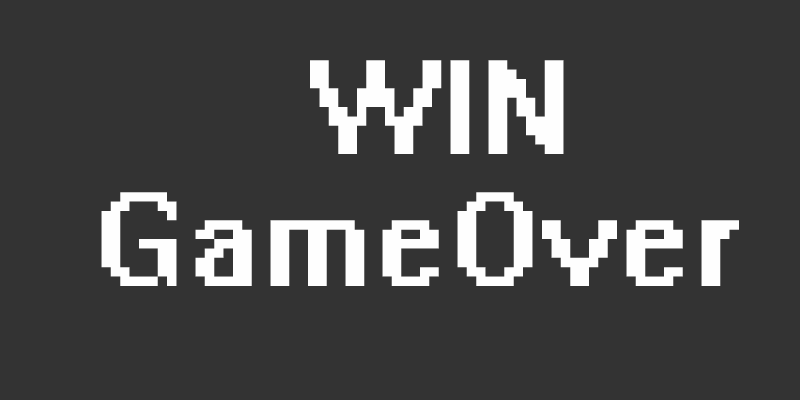
<style>
.page{position:relative;width:800px;height:400px;background:#333333}
.page>*{position:absolute;margin:0}
.t1{font:150px "System";color:#fefefe}
</style>
<div class="page">
<p class="t1" style="left:310px;top:60px;width:254px;height:94px">WIN</p>
<p class="t1" style="left:101px;top:192px;width:638px;height:94px">GameOver</p>
</div>
